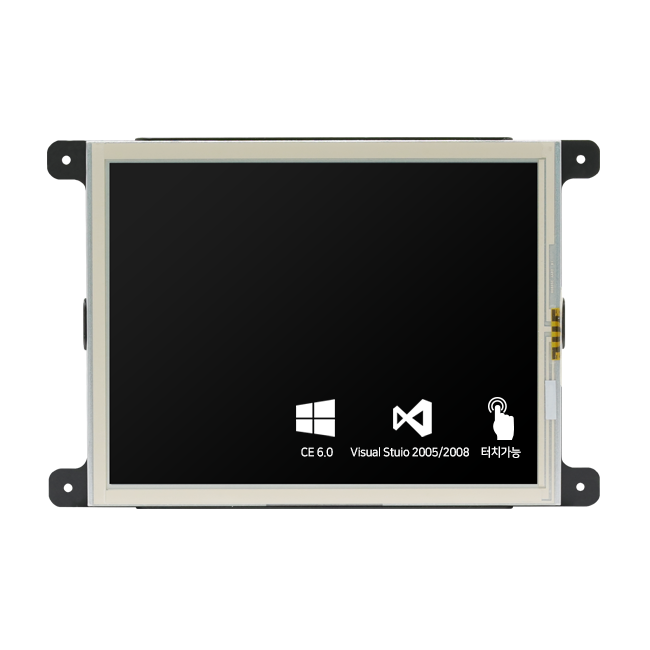
<style>
.page{position:relative;width:650px;height:650px;background:#ffffff}
.page>*{position:absolute;margin:0}
.t1{font:12px "NanumSquareB";letter-spacing:-0.03em;color:#ffffff;scale:0.95 1}
</style>
<div class="page">
<p class="t1" style="left:301px;top:447px;width:32px;height:10px">CE 6.0</p>
<p class="t1" style="left:350px;top:446px;width:119px;height:12px">Visual Stuio 2005/2008</p>
<p class="t1" style="left:481px;top:446px;width:40px;height:12px">터치가능</p>
</div>
